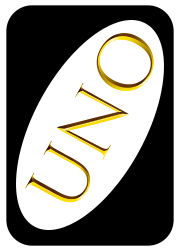
<style>
.page{position:relative;width:180px;height:252px;background:#ffffff}
.page>*{position:absolute;margin:0}
.t1{font:72px "TrajanColor-Concept"}
</style>
<div class="page">
<p class="t1" style="left:25px;top:33px;width:129px;height:170px;rotate:-61deg">Uno</p>
</div>
